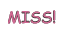
<style>
.page{position:relative;width:64px;height:32px;background:#ffffff}
.page>*{position:absolute;margin:0}
.t1{font:16px "ComicSansMS-Bold"}
.t2{font:16px "ComicSansMS";color:#d06892}
</style>
<div class="page">
<p class="t1" style="left:8px;top:10px;width:48px;height:14px">MISS!</p>
<p class="t2" style="left:8px;top:10px;width:47px;height:14px">MISS!</p>
</div>
